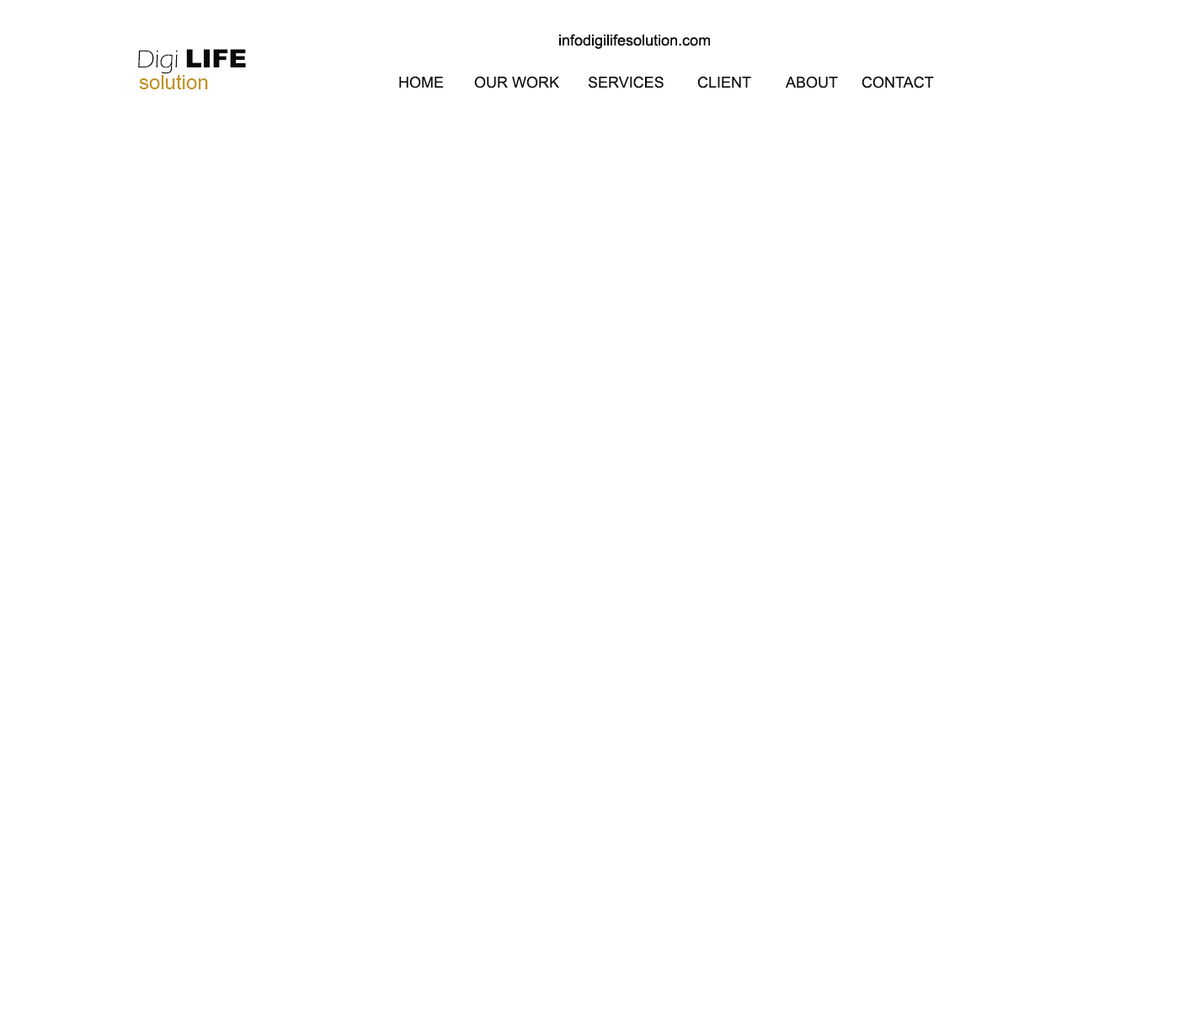
<style>
.page{position:relative;width:1179px;height:1011px;background:#ffffff}
.page>*{position:absolute;margin:0}
.t1{font:25.3px "ErasITC-Light";color:#0c0b0b}
.t2{font:25.3px "Arial-Black";color:#0c0b0b}
.t3{font:20.2px "ArialMT";color:#c19324}
.t4{font:15.2px "ArialMT";color:#0c0b0b}
</style>
<div class="page">
<p class="t1" style="left:138px;top:49px;width:108px;height:25px">Digi <span class="t2">LIFE</span></p>
<p class="t3" style="left:139px;top:74px;width:69px;height:15px">solution</p>
<p class="t4" style="left:399px;top:76px;width:45px;height:12px">HOME</p>
<p class="t4" style="left:474px;top:76px;width:85px;height:12px">OUR WORK</p>
<p class="t4" style="left:588px;top:76px;width:76px;height:12px">SERVICES</p>
<p class="t4" style="left:698px;top:76px;width:53px;height:12px">CLIENT</p>
<p class="t4" style="left:785px;top:76px;width:53px;height:12px">ABOUT</p>
<p class="t4" style="left:862px;top:76px;width:72px;height:12px">CONTACT</p>
</div>
